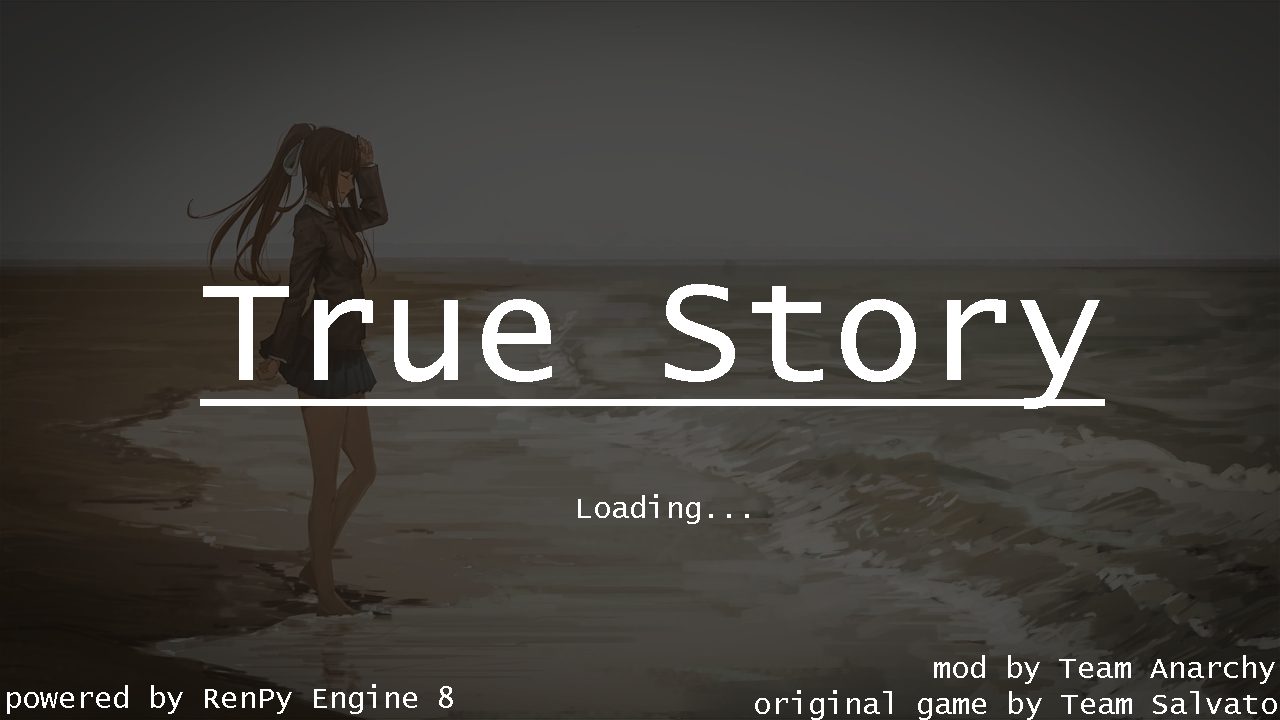
<style>
.page{position:relative;width:1280px;height:720px}
.page>*{position:absolute;margin:0}
.t1{font:150px "LucidaConsole";color:#ffffff;text-decoration:underline}
.t2{font:30px "LucidaConsole";color:#ffffff}
</style>
<div class="page">
<p class="t1" style="left:200px;top:284px;width:905px;height:125px">True Story</p>
<p class="t2" style="left:578px;top:494px;width:171px;height:30px">Loading...</p>
<p class="t2" style="left:934px;top:655px;width:341px;height:29px">mod by Team Anarchy</p>
<p class="t2" style="left:7px;top:684px;width:446px;height:30px">powered by RenPy Engine 8</p>
<p class="t2" style="left:755px;top:690px;width:522px;height:30px">original game by Team Salvato</p>
</div>
